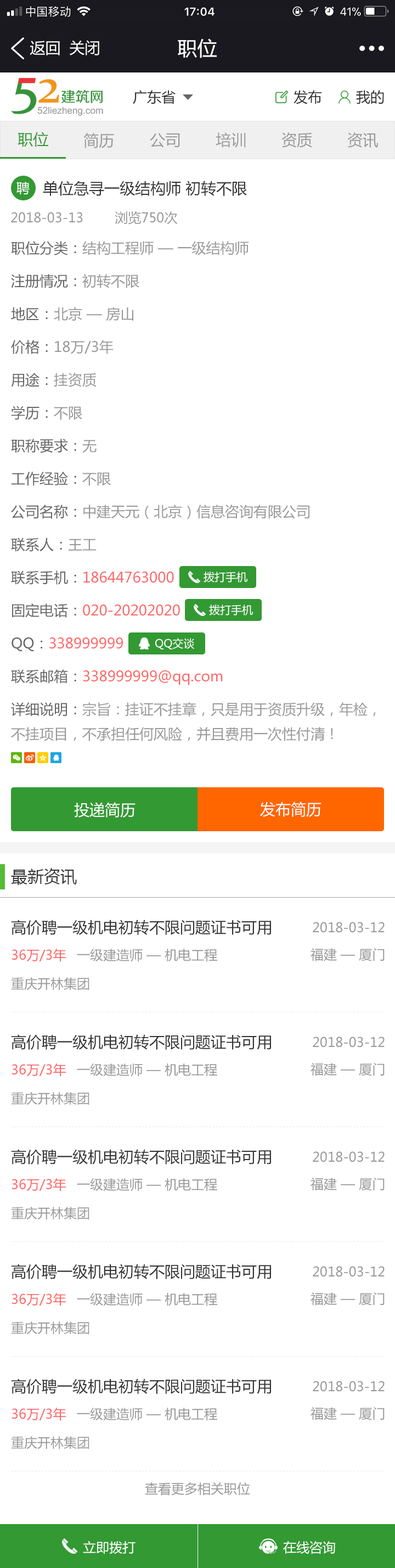
<style>
.page{position:relative;width:395px;height:1568px;background:#ffffff}
.page>*{position:absolute;margin:0}
.t1{font:15.4px "MicrosoftYaHei";color:#ffffff}
.t2{font:19.8px "MicrosoftYaHei";color:#ffffff}
.t3{font:14.3px "MicrosoftYaHei";color:#333333}
.t4{font:15.4px "MicrosoftYaHei";color:#339933}
.t5{font:15.4px "MicrosoftYaHei";color:#999999}
.t6{font:13.2px "MicrosoftYaHei";color:#ffffff}
.t7{font:15.4px "MicrosoftYaHei";color:#333333}
.t8{font:13.2px "MicrosoftYaHei";color:#999999}
.t9{font:14.3px/24.7px "MicrosoftYaHei";color:#999999}
.t10{font:14.3px/32.9px "MicrosoftYaHei";color:#666666}
.t11{font:14.3px/32.9px "MicrosoftYaHei";color:#999999}
.t12{font:14.3px/32.9px "MicrosoftYaHei";color:#ff6666}
.t13{font:14.3px/24.7px "MicrosoftYaHei";color:#666666}
.t14{font:11px "MicrosoftYaHei";color:#ffffff}
.t15{font:16.5px "MicrosoftYaHei";color:#333333}
.t16{font:13.2px "MicrosoftYaHei";color:#ff6666}
</style>
<div class="page">
<p class="t1" style="left:30px;top:41px;width:30px;height:14px">返回</p>
<p class="t1" style="left:70px;top:40px;width:29px;height:15px">关闭</p>
<p class="t2" style="left:178px;top:38px;width:39px;height:20px">职位</p>
<p class="t3" style="left:133px;top:90px;width:43px;height:14px">广东省</p>
<p class="t3" style="left:294px;top:90px;width:28px;height:14px">发布</p>
<p class="t3" style="left:356px;top:90px;width:28px;height:14px">我的</p>
<p class="t4" style="left:18px;top:132px;width:30px;height:15px">职位</p>
<p class="t5" style="left:83px;top:133px;width:31px;height:15px">简历</p>
<p class="t5" style="left:150px;top:133px;width:30px;height:15px">公司</p>
<p class="t5" style="left:216px;top:132px;width:30px;height:16px">培训</p>
<p class="t5" style="left:282px;top:132px;width:30px;height:16px">资质</p>
<p class="t5" style="left:348px;top:132px;width:30px;height:16px">资讯</p>
<p class="t6" style="left:16px;top:182px;width:14px;height:13px">聘</p>
<p class="t7" style="left:43px;top:181px;width:204px;height:15px">单位急寻一级结构师 初转不限</p>
<p class="t8" style="left:11px;top:211px;width:167px;height:14px">2018-03-13        浏览750次</p>
<p class="t9" style="left:11px;top:241px;width:365px;height:500px"><span class="t10">职位分类：</span><span class="t11">结构工程师 — 一级结构师<br></span><span class="t10">注册情况：</span><span class="t11">初转不限<br></span><span class="t10">地区：</span><span class="t11">北京 — 房山<br></span><span class="t10">价格：</span><span class="t11">18万/3年<br></span><span class="t10">用途：</span><span class="t11">挂资质<br></span><span class="t10">学历：</span><span class="t11">不限<br></span><span class="t10">职称要求：</span><span class="t11">无<br></span><span class="t10">工作经验：</span><span class="t11">不限<br></span><span class="t10">公司名称：</span><span class="t11">中建天元（北京）信息咨询有限公司<br></span><span class="t10">联系人：</span><span class="t11">王工<br></span><span class="t10">联系手机：</span><span class="t12">18644763000<br></span><span class="t10">固定电话：</span><span class="t12">020-20202020<br></span><span class="t10">QQ：</span><span class="t12">338999999<br></span><span class="t10">联系邮箱：</span><span class="t12">338999999@qq.com<br></span><span class="t13">详细说明：</span>宗旨：挂证不挂章，只是用于资质升级，年检，<br>不挂项目，不承担任何风险，并且费用一次性付清！</p>
<p class="t14" style="left:204px;top:572px;width:44px;height:11px">拨打手机</p>
<p class="t14" style="left:209px;top:604px;width:44px;height:11px">拨打手机</p>
<p class="t14" style="left:155px;top:638px;width:40px;height:11px">QQ交谈</p>
<p class="t1" style="left:74px;top:802px;width:62px;height:15px">投递简历</p>
<p class="t1" style="left:260px;top:802px;width:62px;height:15px">发布简历</p>
<p class="t15" style="left:11px;top:868px;width:66px;height:17px">最新资讯</p>
<p class="t7" style="left:11px;top:920px;width:260px;height:15px">高价聘一级机电初转不限问题证书可用</p>
<p class="t8" style="left:313px;top:922px;width:72px;height:11px">2018-03-12</p>
<p class="t16" style="left:12px;top:949px;width:54px;height:13px">36万/3年</p>
<p class="t8" style="left:77px;top:949px;width:140px;height:13px">一级建造师 — 机电工程</p>
<p class="t8" style="left:311px;top:948px;width:74px;height:13px">福建 — 厦门</p>
<p class="t8" style="left:11px;top:977px;width:78px;height:13px">重庆开林集团</p>
<p class="t7" style="left:11px;top:1034px;width:260px;height:16px">高价聘一级机电初转不限问题证书可用</p>
<p class="t8" style="left:313px;top:1037px;width:72px;height:11px">2018-03-12</p>
<p class="t16" style="left:12px;top:1063px;width:54px;height:14px">36万/3年</p>
<p class="t8" style="left:77px;top:1063px;width:140px;height:14px">一级建造师 — 机电工程</p>
<p class="t8" style="left:311px;top:1063px;width:74px;height:13px">福建 — 厦门</p>
<p class="t8" style="left:11px;top:1092px;width:78px;height:13px">重庆开林集团</p>
<p class="t7" style="left:11px;top:1149px;width:260px;height:15px">高价聘一级机电初转不限问题证书可用</p>
<p class="t8" style="left:313px;top:1151px;width:72px;height:11px">2018-03-12</p>
<p class="t16" style="left:12px;top:1178px;width:54px;height:13px">36万/3年</p>
<p class="t8" style="left:77px;top:1178px;width:140px;height:13px">一级建造师 — 机电工程</p>
<p class="t8" style="left:311px;top:1178px;width:74px;height:13px">福建 — 厦门</p>
<p class="t8" style="left:11px;top:1207px;width:78px;height:13px">重庆开林集团</p>
<p class="t7" style="left:11px;top:1264px;width:260px;height:15px">高价聘一级机电初转不限问题证书可用</p>
<p class="t8" style="left:313px;top:1266px;width:72px;height:11px">2018-03-12</p>
<p class="t16" style="left:12px;top:1293px;width:54px;height:13px">36万/3年</p>
<p class="t8" style="left:77px;top:1293px;width:140px;height:13px">一级建造师 — 机电工程</p>
<p class="t8" style="left:311px;top:1292px;width:74px;height:14px">福建 — 厦门</p>
<p class="t8" style="left:11px;top:1321px;width:78px;height:14px">重庆开林集团</p>
<p class="t7" style="left:11px;top:1379px;width:260px;height:15px">高价聘一级机电初转不限问题证书可用</p>
<p class="t8" style="left:313px;top:1381px;width:72px;height:11px">2018-03-12</p>
<p class="t16" style="left:12px;top:1408px;width:54px;height:13px">36万/3年</p>
<p class="t8" style="left:77px;top:1408px;width:140px;height:13px">一级建造师 — 机电工程</p>
<p class="t8" style="left:311px;top:1407px;width:74px;height:13px">福建 — 厦门</p>
<p class="t8" style="left:11px;top:1436px;width:78px;height:13px">重庆开林集团</p>
<p class="t8" style="left:145px;top:1482px;width:105px;height:14px">查看更多相关职位</p>
<p class="t6" style="left:83px;top:1541px;width:53px;height:13px">立即拨打</p>
<p class="t6" style="left:283px;top:1541px;width:52px;height:13px">在线咨询</p>
</div>
